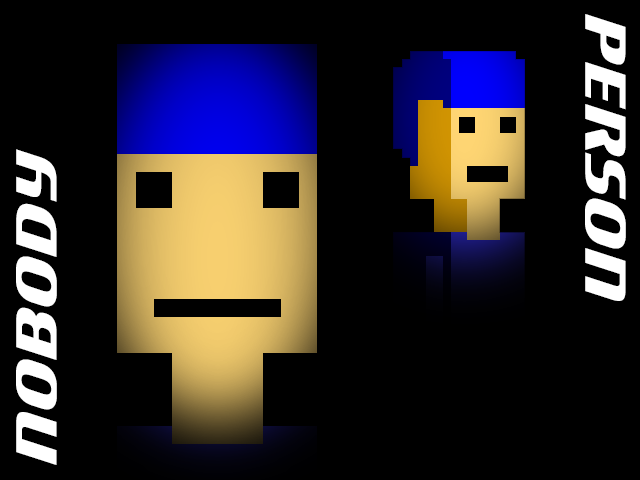
<style>
.page{position:relative;width:640px;height:480px;background:#000000}
.page>*{position:absolute;margin:0}
.t1{font:91px "Motorwerk";color:#ffffff}
</style>
<div class="page">
<p class="t1" style="left:585px;top:14px;width:41px;height:287px;rotate:90deg">PERSON</p>
<p class="t1" style="left:16px;top:149px;width:41px;height:316px;rotate:-90deg">NOBODY</p>
</div>
